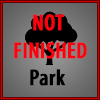
<style>
.page{position:relative;width:100px;height:100px}
.page>*{position:absolute;margin:0}
.t1{font:22.9px "MyriadPro-SemiboldCond";color:#fd020e;font-weight:bold}
.t2{font:22.9px "MyriadPro-SemiboldCond";color:#000000;font-weight:bold}
</style>
<div class="page">
<p class="t1" style="left:14px;top:14px;width:73px;height:45px;text-align:center">NOT <br>FINISHED</p>
<p class="t2" style="left:30px;top:69px;width:36px;height:17px">Park</p>
</div>
